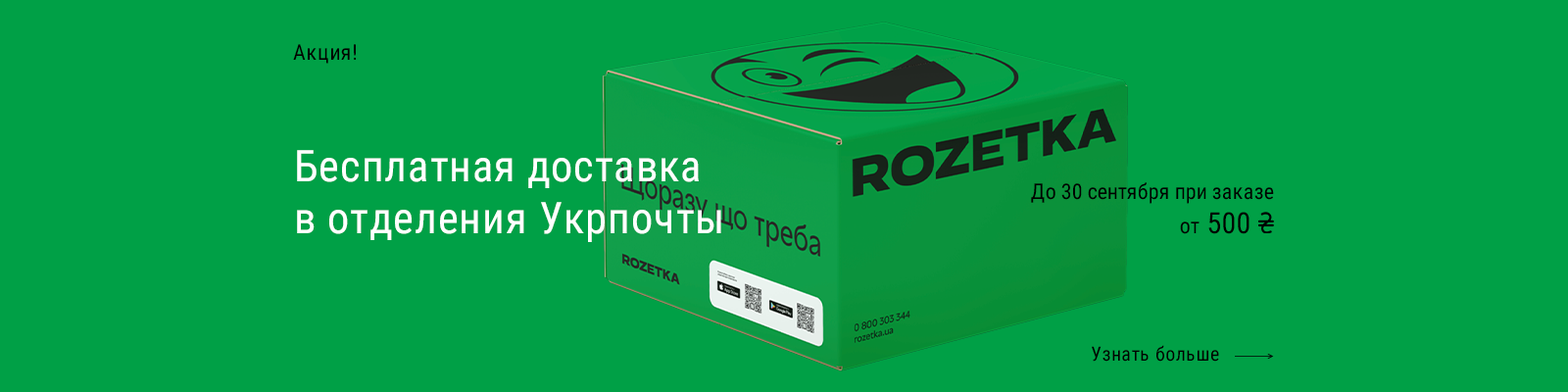
<style>
.page{position:relative;width:1568px;height:392px;background:#00a046}
.page>*{position:absolute;margin:0}
.t1{font:21.6px "RobotoCondensed-Regular";letter-spacing:0.02em;color:#000000}
.t2{font:43.5px "RobotoCondensed-Regular";letter-spacing:0.02em;color:#ffffff}
.t3{font:21.6px "RobotoCondensed-Regular";color:#000000}
.t4{font:29.4px "RobotoCondensed-Regular";color:#000000}
.t5{font:19.6px "RobotoCondensed-Regular";letter-spacing:0.02em;color:#000000}
</style>
<div class="page">
<p class="t1" style="left:293px;top:44px;width:64px;height:20px">Акция!</p>
<p class="t2" style="left:297px;top:150px;width:424px;height:92px">Бесплатная доставка в отделения Укрпочты</p>
<p class="t3" style="left:1031px;top:182px;width:243px;height:22px">До 30 сентября при заказе</p>
<p class="t3" style="left:1180px;top:221px;width:20px;height:13px">от</p>
<p class="t4" style="left:1208px;top:212px;width:42px;height:22px">500</p>
<p class="t5" style="left:1092px;top:345px;width:127px;height:17px">Узнать больше</p>
</div>
